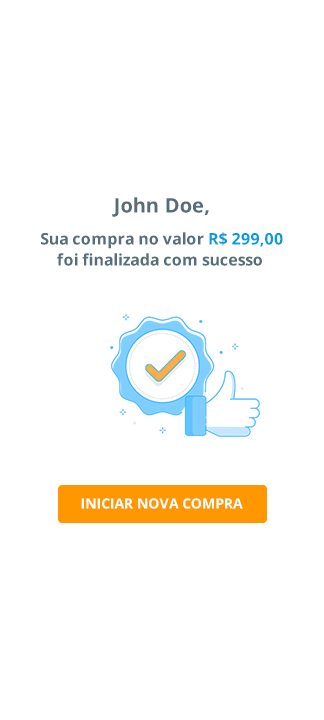
<style>
.page{position:relative;width:324px;height:720px;background:#ffffff}
.page>*{position:absolute;margin:0}
.t1{font:16px/21px "OpenSans-Bold";color:#546e7a}
.t2{font:20px/21px "OpenSans-Bold";color:#546e7a}
.t3{font:16px/32px "OpenSans-Bold";color:#546e7a}
.t4{font:16px/32px "OpenSans-Bold";color:#019cdf}
.t5{font:14px "OpenSans-Bold";color:#ffffff;text-transform:uppercase}
</style>
<div class="page">
<p class="t1" style="left:41px;top:197px;width:242px;height:69px;text-align:center"><span class="t2">John Doe,<br></span><span class="t3">Sua compra no valor </span><span class="t4">R$ 299,00<br></span>foi finalizada com sucesso</p>
<p class="t5" style="left:81px;top:498px;width:162px;height:11px">iniciar nova compra</p>
</div>
